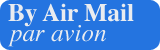
<style>
.page{position:relative;width:160px;height:50px;background:#2474e0}
.page>*{position:absolute;margin:0}
.t1{font:25px "Times-Bold";color:#e9ecf0}
.t2{font:25px "Times-Italic";color:#e9ecf0}
</style>
<div class="page">
<p class="t1" style="left:8px;top:3px;width:126px;height:24px">By Air Mail</p>
<p class="t2" style="left:8px;top:25px;width:98px;height:22px">par avion</p>
</div>
